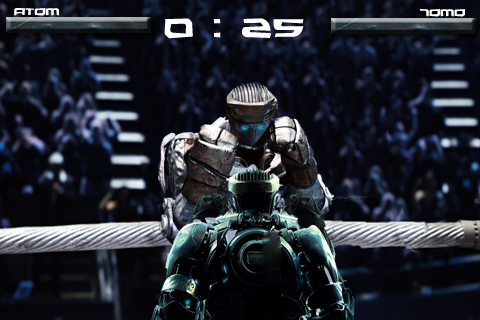
<style>
.page{position:relative;width:480px;height:320px}
.page>*{position:absolute;margin:0}
.t1{font:18px "AlexisGrunge";color:#ffffff}
.t2{font:48px "AlexisGrunge";color:#ffffff}
</style>
<div class="page">
<p class="t1" style="left:14px;top:8px;width:45px;height:8px">atom</p>
<p class="t1" style="left:419px;top:9px;width:46px;height:8px">Tomo</p>
<p class="t2" style="left:164px;top:18px;width:140px;height:21px">0 : 25</p>
</div>
